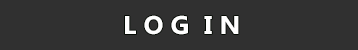
<style>
.page{position:relative;width:358px;height:50px;background:#303030}
.page>*{position:absolute;margin:0}
.t1{font:25.7px "Gadugi-Bold";color:#ffffff}
</style>
<div class="page">
<p class="t1" style="left:125px;top:15px;width:114px;height:20px">L O G  I N</p>
</div>
